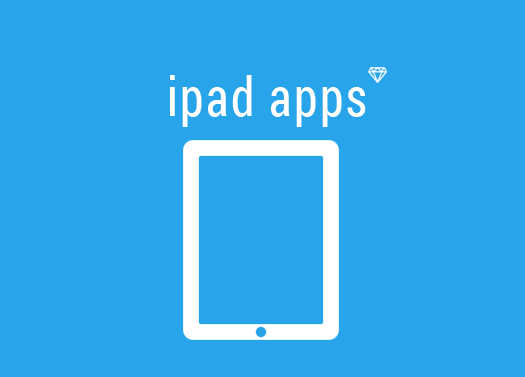
<style>
.page{position:relative;width:525px;height:377px;background:#28a4ea}
.page>*{position:absolute;margin:0}
.t1{font:54px "RobotoCondensed-Regular";letter-spacing:0.05em;color:#ffffff;scale:0.89 1}
</style>
<div class="page">
<p class="t1" style="left:170px;top:75px;width:196px;height:52px">ipad apps</p>
</div>
